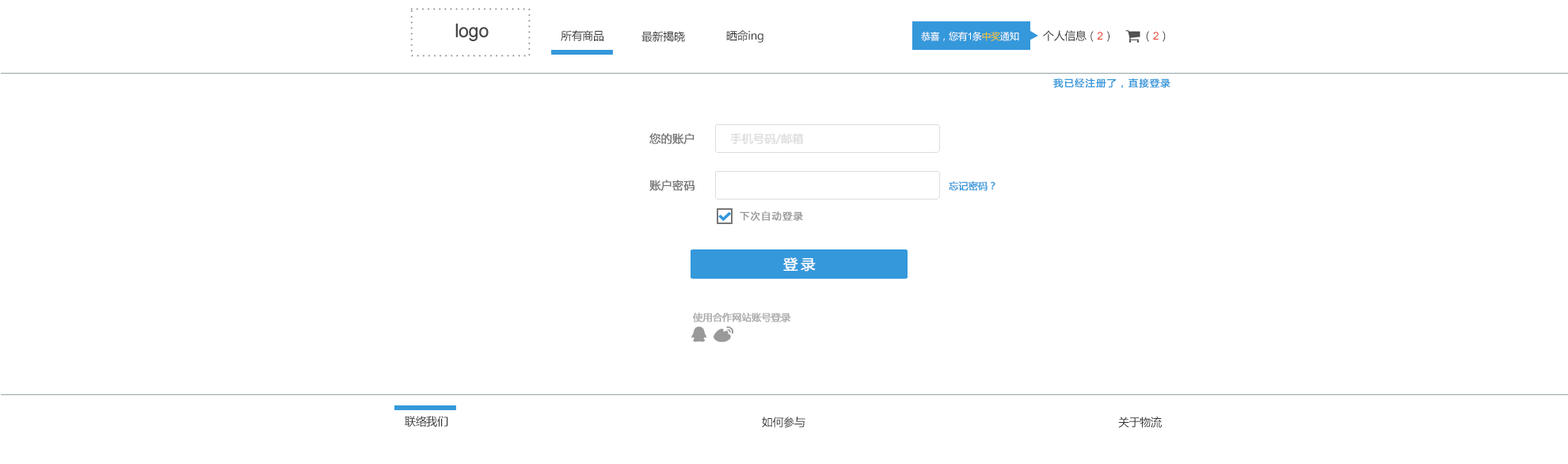
<style>
.page{position:relative;width:1568px;height:464px;background:#ffffff}
.page>*{position:absolute;margin:0}
.t1{font:11.1px "MicrosoftYaHei";letter-spacing:-0.025em;color:#333333}
.t2{font:9.5px "MicrosoftYaHei";letter-spacing:-0.025em;color:#ffffff}
.t3{font:9.5px "ArialMT";letter-spacing:-0.025em;color:#ffffff}
.t4{font:9.5px "MicrosoftYaHei";letter-spacing:-0.025em;color:#f1c619}
.t5{font:11.1px "ArialMT";letter-spacing:-0.025em;color:#e74c3c}
.t6{font:9.5px "MicrosoftYaHei";letter-spacing:0.1em;color:#3498db;font-weight:bold}
.t7{font:11.1px "MicrosoftYaHei";color:#777777;font-weight:bold}
.t8{font:11.1px "MicrosoftYaHei";color:#dddddd;font-weight:bold}
.t9{font:9.5px "MicrosoftYaHei";color:#3498db;font-weight:bold}
.t10{font:9.5px "MicrosoftYaHei";letter-spacing:0.1em;color:#999999;font-weight:bold}
.t11{font:14.3px "MicrosoftYaHei";letter-spacing:0.2em;color:#ffffff;font-weight:bold}
.t12{font:9.5px "MicrosoftYaHei";color:#aaaaaa;font-weight:bold}
</style>
<div class="page">
<p class="t1" style="left:561px;top:30px;width:42px;height:11px">所有商品</p>
<p class="t1" style="left:641px;top:31px;width:44px;height:11px">最新揭晓</p>
<p class="t1" style="left:726px;top:30px;width:37px;height:13px">晒命ing</p>
<p class="t2" style="left:921px;top:32px;width:98px;height:9px">恭喜，您有<span class="t3">1</span>条<span class="t4">中奖</span>通知</p>
<p class="t1" style="left:1043px;top:30px;width:66px;height:12px">个人信息（<span class="t5">2</span>）</p>
<p class="t1" style="left:1146px;top:31px;width:20px;height:11px">（<span class="t5">2</span>）</p>
<p class="t6" style="left:1053px;top:78px;width:117px;height:10px">我已经注册了，直接登录</p>
<p class="t7" style="left:649px;top:133px;width:46px;height:12px">您的账户</p>
<p class="t8" style="left:730px;top:133px;width:74px;height:12px">手机号码/邮箱</p>
<p class="t7" style="left:649px;top:180px;width:46px;height:12px">账户密码</p>
<p class="t9" style="left:949px;top:181px;width:46px;height:10px">忘记密码？</p>
<p class="t10" style="left:740px;top:211px;width:63px;height:10px">下次自动登录</p>
<p class="t11" style="left:783px;top:257px;width:33px;height:15px">登录</p>
<p class="t12" style="left:693px;top:313px;width:98px;height:9px">使用合作网站账号登录</p>
<p class="t1" style="left:405px;top:416px;width:43px;height:11px">联络我们</p>
<p class="t1" style="left:762px;top:417px;width:43px;height:11px">如何参与</p>
<p class="t1" style="left:1118px;top:417px;width:44px;height:11px">关于物流</p>
</div>
